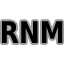
<style>
.page{position:relative;width:64px;height:64px;background:#ffffff}
.page>*{position:absolute;margin:0}
.t1{font:29.9px "DejaVuSans-Bold";color:#000000;scale:0.84 1}
</style>
<div class="page">
<p class="t1" style="left:2px;top:21px;width:61px;height:22px">RNM</p>
</div>
